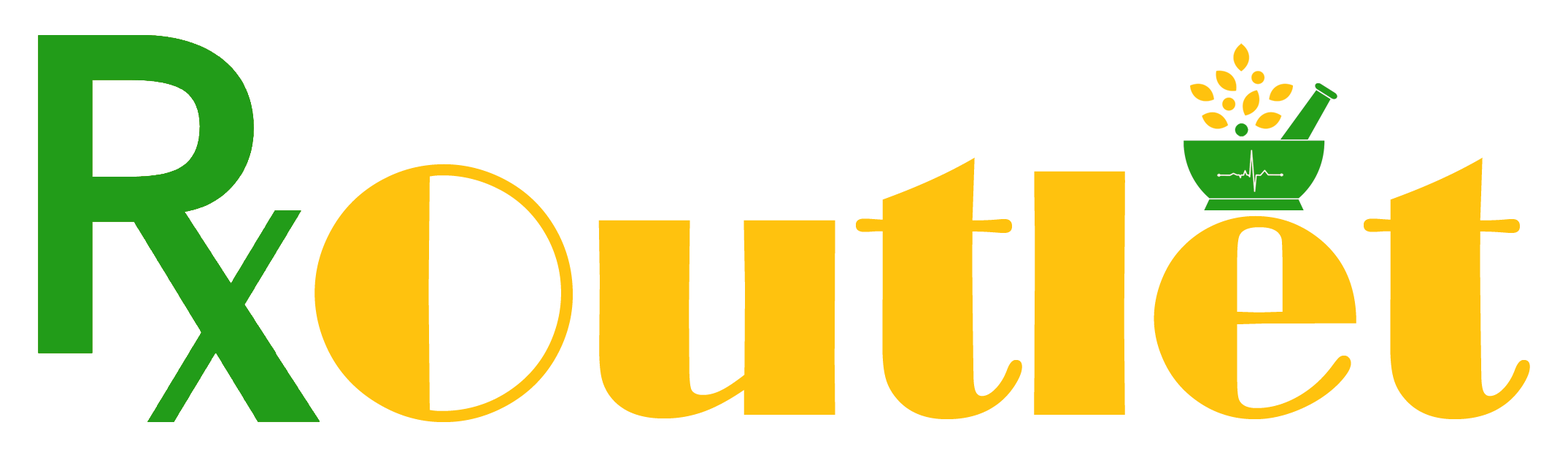
<style>
.page{position:relative;width:1568px;height:471px;background:#ffffff}
.page>*{position:absolute;margin:0}
.t1{font:364.2px "Broadway";color:#ffc20e}
</style>
<div class="page">
<p class="t1" style="left:314px;top:158px;width:1216px;height:264px">Outlet</p>
</div>
